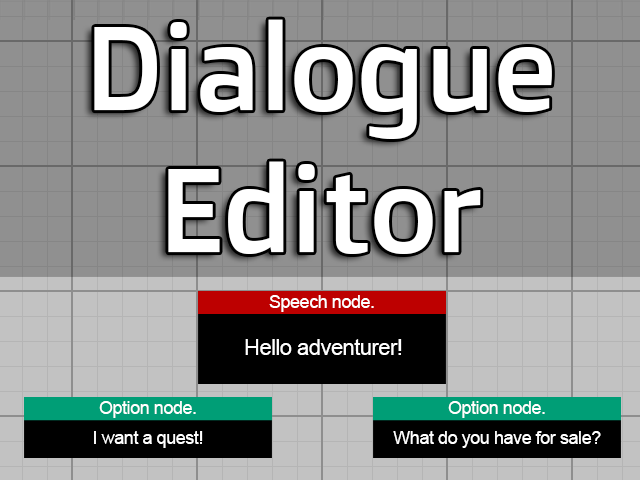
<style>
.page{position:relative;width:640px;height:480px;background:#909090}
.page>*{position:absolute;margin:0}
.t1{font:119px/142px "DoppioOne-Regular";letter-spacing:-0.025em;color:#ffffff}
.t2{font:18px "ArialMT";letter-spacing:-0.025em;color:#ffffff}
.t3{font:22px "ArialMT";letter-spacing:-0.025em;color:#ffffff}
</style>
<div class="page">
<p class="t1" style="left:94px;top:19px;width:458px;height:235px;text-align:center">Dialogue <br>Editor</p>
<p class="t2" style="left:269px;top:295px;width:105px;height:17px">Speech node.</p>
<p class="t3" style="left:245px;top:339px;width:157px;height:16px">Hello adventurer!</p>
<p class="t2" style="left:99px;top:401px;width:97px;height:17px">Option node.</p>
<p class="t2" style="left:448px;top:401px;width:97px;height:17px">Option node.</p>
<p class="t2" style="left:94px;top:431px;width:109px;height:17px">I want a quest!</p>
<p class="t2" style="left:393px;top:431px;width:208px;height:17px">What do you have for sale?</p>
</div>
